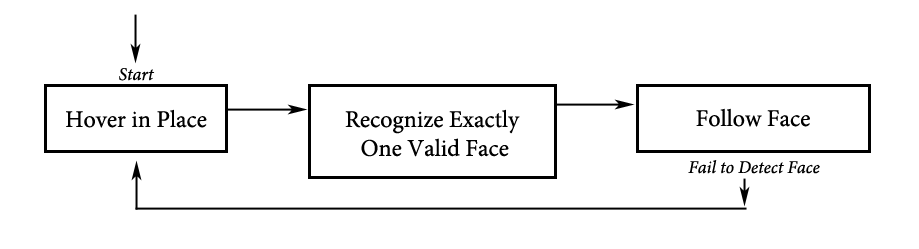
<style>
.page{position:relative;width:919px;height:249px;background:#ffffff}
.page>*{position:absolute;margin:0}
.t1{font:18px "MinionPro-It";color:#000000}
.t2{font:24px "MinionPro-Regular";color:#000000}
</style>
<div class="page">
<p class="t1" style="left:119px;top:68px;width:36px;height:13px">Start</p>
<p class="t2" style="left:66px;top:109px;width:141px;height:19px">Hover in Place</p>
<p class="t2" style="left:345px;top:109px;width:175px;height:48px;text-align:center">Recognize Exactly<br> One Valid Face</p>
<p class="t2" style="left:696px;top:108px;width:114px;height:19px">Follow Face</p>
<p class="t1" style="left:688px;top:160px;width:132px;height:14px">Fail to Detect Face</p>
</div>
